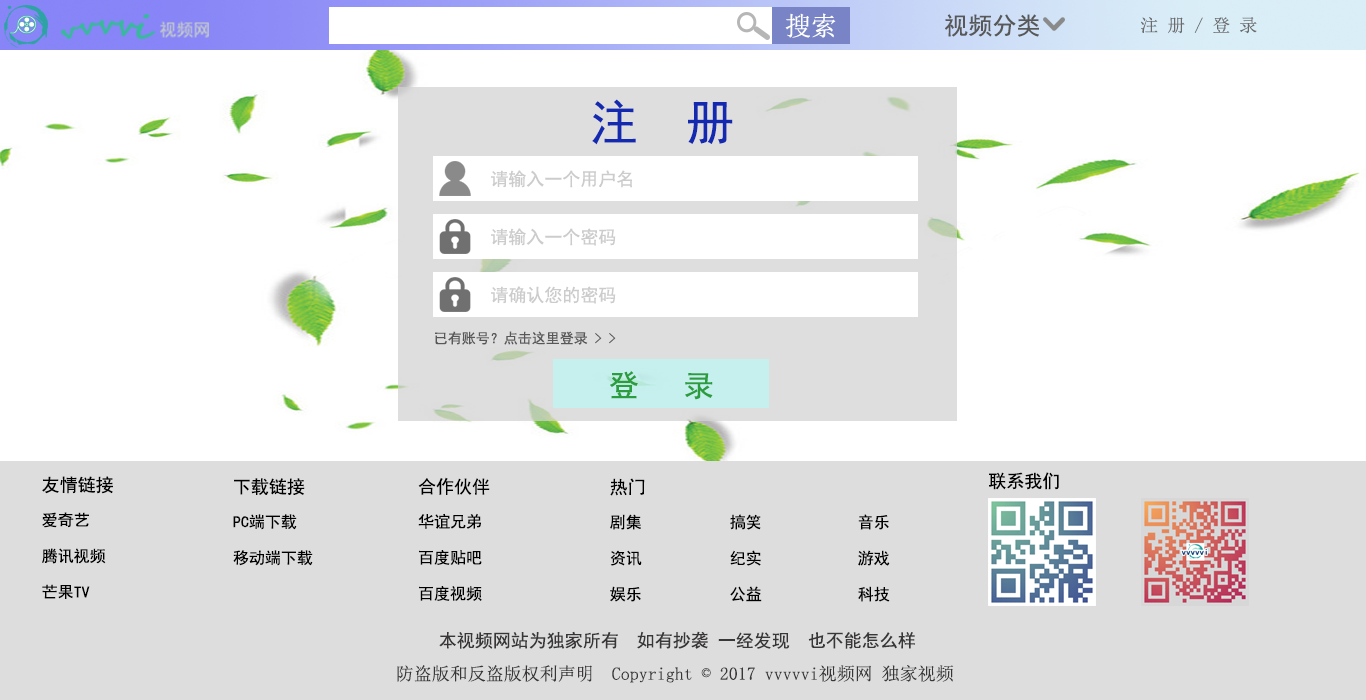
<style>
.page{position:relative;width:1366px;height:700px;background:#ffffff}
.page>*{position:absolute;margin:0}
.t1{font:26px "SimSun";color:#ffffff}
.t2{font:24px "SimHei";color:#585858}
.t3{font:18px "SimSun";color:#6a6a6a}
.t4{font:48px "SimHei";color:#1329b0}
.t5{font:18px "SimHei";color:#cccccc}
.t6{font:14px "SimHei";color:#585858}
.t7{font:30px "SimHei";color:#2c9d3e}
.t8{font:18px "SimHei";color:#000000}
.t9{font:16px/36px "SimHei";color:#000000}
.t10{font:18px/36px "SimHei";color:#000000}
.t11{font:18px "SimHei";color:#383636}
.t12{font:18px "SimSun";color:#383636}
</style>
<div class="page">
<p class="t1" style="left:785px;top:13px;width:51px;height:25px">搜索</p>
<p class="t2" style="left:945px;top:14px;width:94px;height:23px">视频分类</p>
<p class="t3" style="left:1141px;top:17px;width:116px;height:17px">注 册 / 登 录</p>
<p class="t4" style="left:592px;top:99px;width:141px;height:46px">注  册</p>
<p class="t5" style="left:491px;top:170px;width:141px;height:18px">请输入一个用户名</p>
<p class="t5" style="left:491px;top:228px;width:125px;height:18px">请输入一个密码</p>
<p class="t5" style="left:491px;top:286px;width:125px;height:18px">请确认您的密码</p>
<p class="t6" style="left:435px;top:331px;width:181px;height:14px">已有账号？点击这里登录 &gt; &gt;</p>
<p class="t7" style="left:610px;top:371px;width:103px;height:29px">登   录</p>
<p class="t8" style="left:989px;top:472px;width:70px;height:18px">联系我们</p>
<p class="t9" style="left:42px;top:476px;width:71px;height:123px"><span class="t10">友情链接<br></span>爱奇艺<br>腾讯视频<br>芒果TV</p>
<p class="t9" style="left:233px;top:478px;width:80px;height:88px"><span class="t10">下载链接<br></span>PC端下载<br>移动端下载</p>
<p class="t9" style="left:418px;top:477px;width:72px;height:124px"><span class="t10">合作伙伴<br></span>华谊兄弟<br>百度贴吧<br>百度视频</p>
<p class="t9" style="left:610px;top:478px;width:280px;height:124px"><span class="t10">热门<br></span>剧集           搞笑            音乐<br>资讯           纪实            游戏<br>娱乐           公益            科技</p>
<p class="t11" style="left:439px;top:631px;width:476px;height:18px">本视频网站为独家所有  如有抄袭 一经发现  也不能怎么样</p>
<p class="t12" style="left:397px;top:665px;width:557px;height:18px">防盗版和反盗版权利声明  Copyright © 2017 vvvvvi视频网 独家视频</p>
</div>
